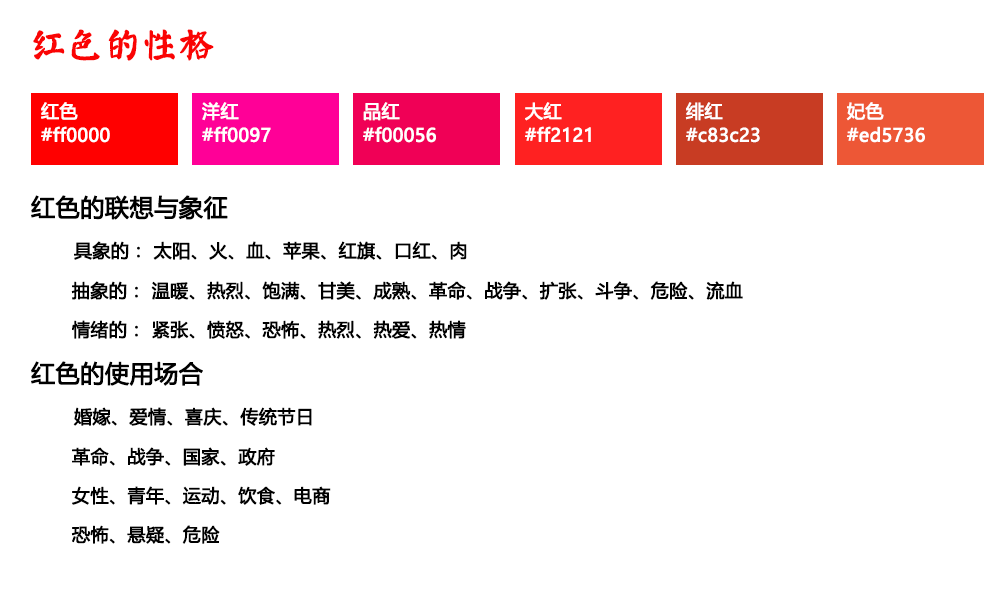
<style>
.page{position:relative;width:1000px;height:600px;background:#ffffff}
.page>*{position:absolute;margin:0}
.t1{font:36px "øów·»îów©I";color:#fa0404;font-weight:bold}
.t2{font:18px/24px "MicrosoftYaHei";color:#ffffff;font-weight:bold}
.t3{font:24px "MicrosoftYaHei";color:#000000;font-weight:bold}
.t4{font:18px "MicrosoftYaHei";color:#000000;font-weight:bold}
</style>
<div class="page">
<p class="t1" style="left:33px;top:29px;width:181px;height:32px">红色的性格</p>
<p class="t2" style="left:41px;top:102px;width:69px;height:41px">红色<br>#ff0000</p>
<p class="t2" style="left:202px;top:102px;width:69px;height:41px">洋红<br>#ff0097</p>
<p class="t2" style="left:363px;top:102px;width:73px;height:41px">品红<br>#f00056</p>
<p class="t2" style="left:525px;top:102px;width:66px;height:40px">大红<br>#ff2121</p>
<p class="t2" style="left:685px;top:102px;width:75px;height:41px">绯红<br>#c83c23</p>
<p class="t2" style="left:846px;top:102px;width:79px;height:41px">妃色<br>#ed5736</p>
<p class="t3" style="left:31px;top:195px;width:197px;height:25px">红色的联想与象征</p>
<p class="t4" style="left:74px;top:241px;width:393px;height:19px">具象的： 太阳、火、血、苹果、红旗、口红、肉</p>
<p class="t4" style="left:71px;top:281px;width:672px;height:19px">抽象的： 温暖、热烈、饱满、甘美、成熟、革命、战争、扩张、斗争、危险、流血</p>
<p class="t4" style="left:72px;top:320px;width:394px;height:19px">情绪的： 紧张、愤怒、恐怖、热烈、热爱、热情</p>
<p class="t3" style="left:31px;top:361px;width:172px;height:25px">红色的使用场合</p>
<p class="t4" style="left:73px;top:407px;width:239px;height:19px">婚嫁、爱情、喜庆、传统节日</p>
<p class="t4" style="left:72px;top:447px;width:203px;height:19px">革命、战争、国家、政府</p>
<p class="t4" style="left:72px;top:486px;width:259px;height:19px">女性、青年、运动、饮食、电商</p>
<p class="t4" style="left:71px;top:525px;width:149px;height:19px">恐怖、悬疑、危险</p>
</div>
